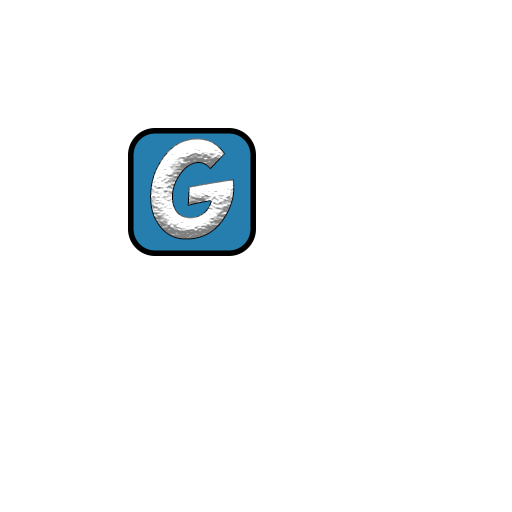
<style>
.page{position:relative;width:512px;height:512px;background:#ffffff}
.page>*{position:absolute;margin:0}
.t1{font:95.9px "ObelixPro"}
</style>
<div class="page">
<p class="t1" style="left:150px;top:138px;width:85px;height:102px">G</p>
</div>
